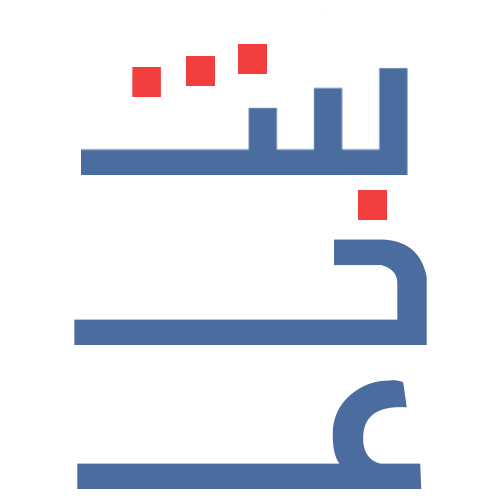
<style>
.page{position:relative;width:500px;height:500px;background:#ffffff}
.page>*{position:absolute;margin:0}
.t1{font:272.7px "AlarabiyaFont-Normal";letter-spacing:0.01em;color:#4a6c9f}
</style>
<div class="page">
<p class="t1" style="left:74px;top:190px;width:353px;height:155px">خــــــ</p>
<p class="t1" style="left:77px;top:380px;width:345px;height:109px">عــــــ</p>
</div>
